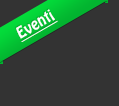
<style>
.page{position:relative;width:119px;height:106px;background:#333333}
.page>*{position:absolute;margin:0}
.t1{font:14px "HoboStd";letter-spacing:0.02em;color:#ffffff;text-decoration:underline}
</style>
<div class="page">
<p class="t1" style="left:16px;top:9px;width:42px;height:33px;rotate:-30deg">Eventi</p>
</div>
